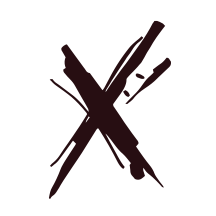
<style>
.page{position:relative;width:216px;height:216px;background:#ffffff}
.page>*{position:absolute;margin:0}
.t1{font:300px "WhoasksSatan";color:#270e12}
</style>
<div class="page">
<p class="t1" style="left:48px;top:20px;width:123px;height:179px">x</p>
</div>
